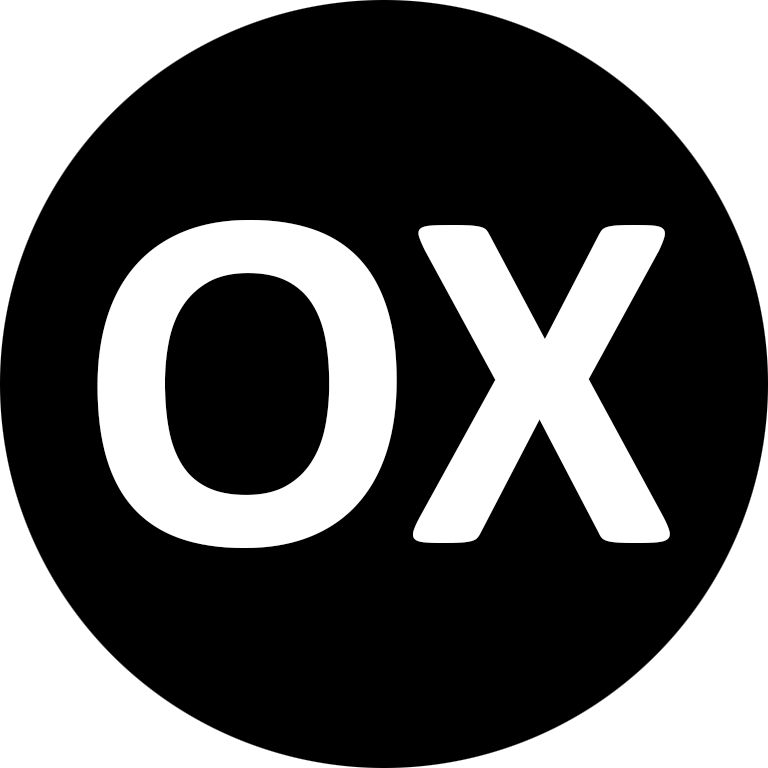
<style>
.page{position:relative;width:768px;height:768px;background:#000000}
.page>*{position:absolute;margin:0}
.t1{font:500px "Calibri-Bold";color:#ffffff}
</style>
<div class="page">
<p class="t1" style="left:97px;top:220px;width:573px;height:328px">ОХ</p>
</div>
